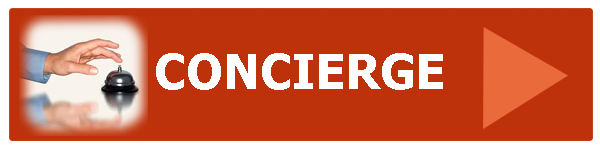
<style>
.page{position:relative;width:600px;height:150px;background:#bd320b}
.page>*{position:absolute;margin:0}
.t1{font:48px "Tahoma-Bold";color:#ffffff}
</style>
<div class="page">
<p class="t1" style="left:156px;top:53px;width:287px;height:37px">CONCIERGE</p>
</div>
